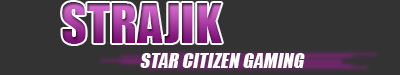
<style>
.page{position:relative;width:400px;height:75px;background:#333333}
.page>*{position:absolute;margin:0}
.t1{font:50px "Impact"}
.t2{font:19.4px "Impact";color:#fffeff;font-style:italic}
</style>
<div class="page">
<p class="t1" style="left:62px;top:2px;width:160px;height:42px">STRAJIK</p>
<p class="t2" style="left:140px;top:53px;width:165px;height:15px">STAR CITIZEN GAMING</p>
</div>
